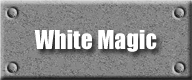
<style>
.page{position:relative;width:192px;height:80px}
.page>*{position:absolute;margin:0}
.t1{font:24px "Impact";color:#ffffff}
</style>
<div class="page">
<p class="t1" style="left:34px;top:30px;width:123px;height:22px">White Magic</p>
</div>
